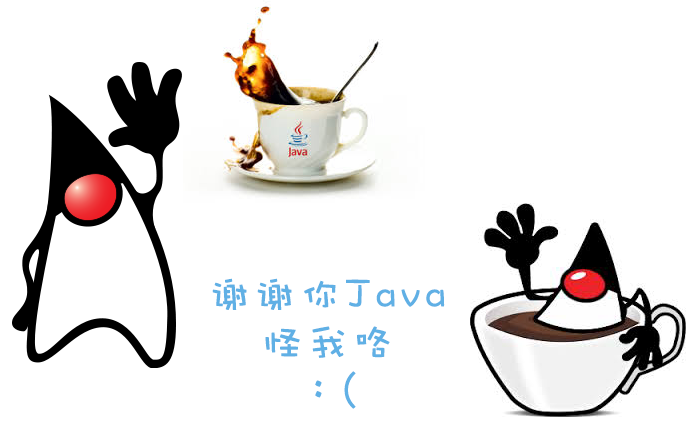
<style>
.page{position:relative;width:700px;height:438px;background:#ffffff}
.page>*{position:absolute;margin:0}
.t1{font:40px/48px "DFWaWaSC-W5";letter-spacing:0.1em;color:#60b0e5;font-weight:bold}
</style>
<div class="page">
<p class="t1" style="left:212px;top:278px;width:233px;height:131px;text-align:center">谢谢你Java<br>怪我咯<br>：(</p>
</div>
